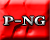
<style>
.page{position:relative;width:50px;height:40px}
.page>*{position:absolute;margin:0}
.t1{font:11.2px "MyungjoXB-HM";scale:1.53 1}
</style>
<div class="page">
<p class="t1" style="left:3px;top:16px;width:43px;height:9px">P-NG</p>
</div>
